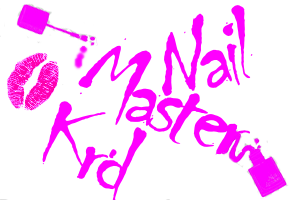
<style>
.page{position:relative;width:300px;height:200px;background:#ffffff}
.page>*{position:absolute;margin:0}
.t1{font:110px "Chiller-Regular";letter-spacing:-0.075em;color:#ff00ff;font-style:italic}
.t2{font:110px "Chiller-Regular";letter-spacing:-0.075em;color:#ff00ff}
</style>
<div class="page">
<p class="t1" style="left:162px;top:5px;width:91px;height:97px;rotate:-17deg">Nail</p>
<p class="t1" style="left:78px;top:38px;width:173px;height:117px;rotate:19deg">Master</p>
<p class="t2" style="left:42px;top:101px;width:105px;height:100px;rotate:22deg">Krd</p>
</div>
